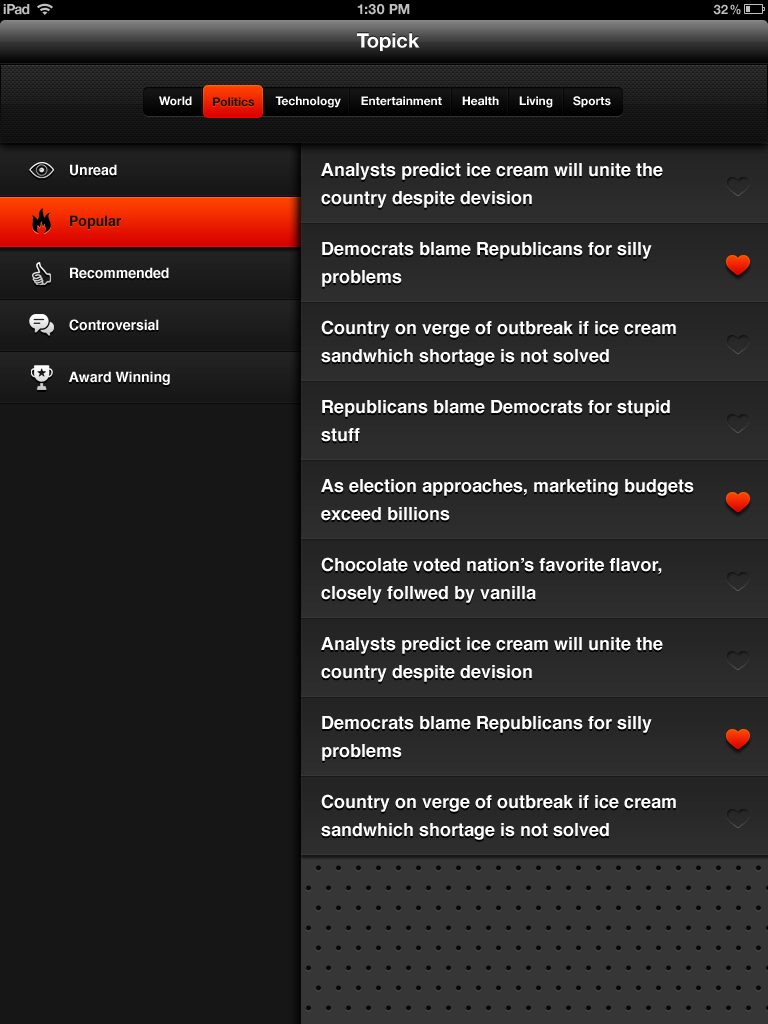
<style>
.page{position:relative;width:768px;height:1024px;background:#161616}
.page>*{position:absolute;margin:0}
.t1{font:14px "HelveticaNeue-Bold";letter-spacing:-0.06em;color:#bfbfbf}
.t2{font:14px "HelveticaNeue-Bold";color:#bfbfbf;text-transform:uppercase}
.t3{font:13px "HelveticaNeue-Bold";color:#bfbfbf;text-transform:uppercase}
.t4{font:13px "HelveticaNeue-Bold";color:#bfbfbf;text-transform:uppercase;scale:0.89 1}
.t5{font:20px "HelveticaNeue-Bold";color:#ffffff}
.t6{font:12px "HelveticaNeue-Bold";color:#ffffff}
.t7{font:12px "HelveticaNeue-Bold";color:#161616}
.t8{font:14px "Helvetica-Bold";color:#ffffff}
.t9{font:18px/28px "Helvetica-Bold";color:#ffffff}
.t10{font:14px "Helvetica-Bold";color:#161616}
</style>
<div class="page">
<p class="t1" style="left:3px;top:4px;width:27px;height:11px">iPad</p>
<p class="t2" style="left:357px;top:4px;width:53px;height:11px">1:30 PM</p>
<p class="t3" style="left:713px;top:4px;width:28px;height:11px">32<span class="t4">%</span></p>
<p class="t5" style="left:357px;top:33px;width:63px;height:18px">Topick</p>
<p class="t6" style="left:159px;top:96px;width:452px;height:12px">World                         Technology      Entertainment      Health      Living      Sports</p>
<p class="t7" style="left:213px;top:97px;width:41px;height:10px">Politics</p>
<p class="t8" style="left:70px;top:164px;width:47px;height:12px">Unread</p>
<p class="t9" style="left:321px;top:163px;width:342px;height:45px">Analysts predict ice cream will unite the<br>country despite devision</p>
<p class="t10" style="left:70px;top:215px;width:51px;height:14px">Popular</p>
<p class="t9" style="left:322px;top:242px;width:330px;height:45px">Democrats blame Republicans for silly<br>problems</p>
<p class="t8" style="left:70px;top:267px;width:99px;height:12px">Recommended</p>
<p class="t8" style="left:69px;top:319px;width:90px;height:12px">Controversial</p>
<p class="t9" style="left:321px;top:320px;width:355px;height:46px">Country on verge of outbreak if ice cream<br>sandwhich shortage is not solved</p>
<p class="t8" style="left:69px;top:371px;width:101px;height:14px">Award Winning</p>
<p class="t9" style="left:321px;top:400px;width:349px;height:42px">Republicans blame Democrats for stupid<br>stuff</p>
<p class="t9" style="left:321px;top:479px;width:373px;height:42px">As election approaches, marketing budgets<br>exceed billions</p>
<p class="t9" style="left:321px;top:557px;width:341px;height:46px">Chocolate voted nation’s favorite flavor,<br>closely follwed by vanilla</p>
<p class="t9" style="left:321px;top:637px;width:342px;height:45px">Analysts predict ice cream will unite the<br>country despite devision</p>
<p class="t9" style="left:322px;top:716px;width:330px;height:45px">Democrats blame Republicans for silly<br>problems</p>
<p class="t9" style="left:321px;top:794px;width:355px;height:46px">Country on verge of outbreak if ice cream<br>sandwhich shortage is not solved</p>
</div>
